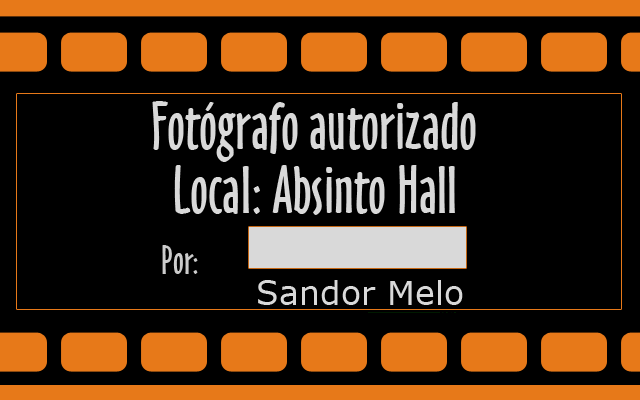
<style>
.page{position:relative;width:640px;height:400px;background:#000000}
.page>*{position:absolute;margin:0}
.t1{font:62.5px "OzHandicraftBT-Roman";color:#d9d9d9}
.t2{font:37.5px "OzHandicraftBT-Roman";color:#cccccc}
.t3{font:33.3px "Verdana";color:#d9d9d9}
</style>
<div class="page">
<p class="t1" style="left:152px;top:101px;width:324px;height:61px">Fotógrafo autorizado</p>
<p class="t1" style="left:174px;top:165px;width:281px;height:50px">Local: Absinto Hall</p>
<p class="t2" style="left:162px;top:245px;width:36px;height:29px">Por:</p>
<p class="t3" style="left:258px;top:280px;width:205px;height:25px">Sandor Melo</p>
</div>
